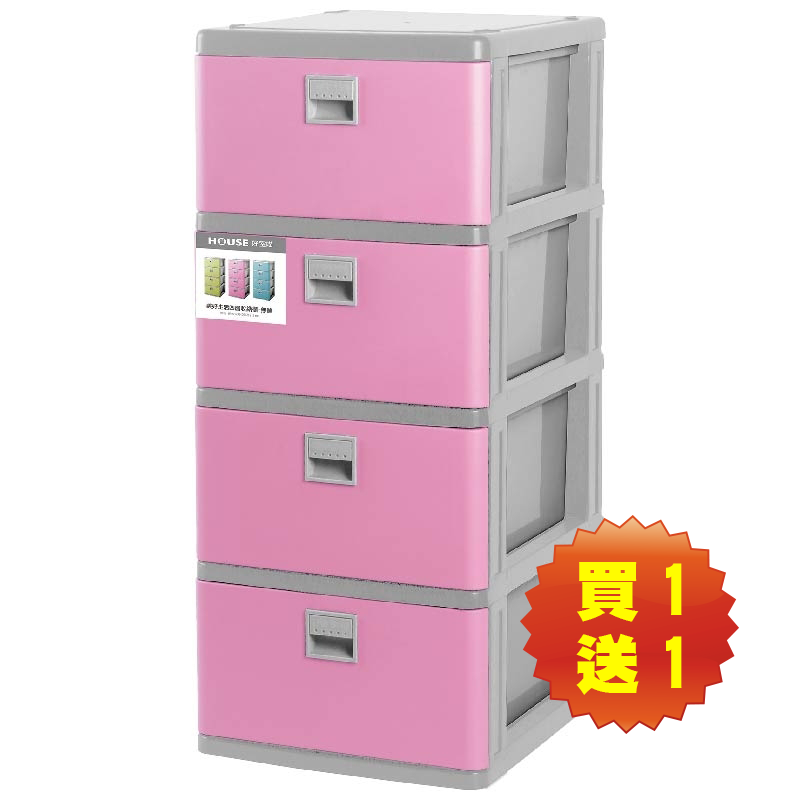
<style>
.page{position:relative;width:800px;height:800px;background:#ffffff}
.page>*{position:absolute;margin:0}
.t1{font:65px/73.4px "DFHei-UB-HK-BF";color:#fffc00}
</style>
<div class="page">
<p class="t1" style="left:576px;top:562px;width:106px;height:133px">買1<br>送1</p>
</div>
